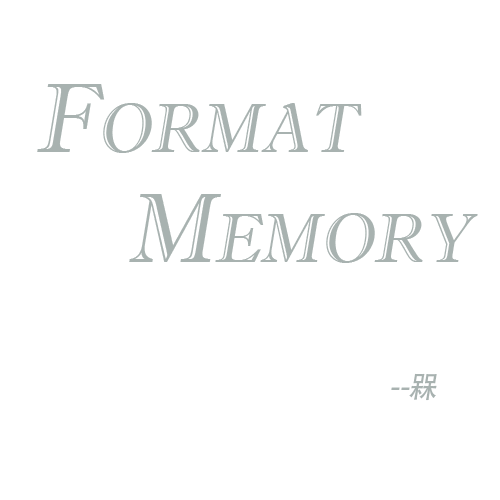
<style>
.page{position:relative;width:500px;height:500px;background:#ffffff}
.page>*{position:absolute;margin:0}
.t1{font:99.4px/11px "ImprintMT-Shadow";color:#a8b2b0;font-variant:small-caps;font-style:italic;scale:0.94 1}
.t2{font:30.4px/11px "AdobeHeitiStd-Regular";color:#a8b2b0;font-variant:small-caps;font-style:italic;scale:0.94 1}
</style>
<div class="page">
<p class="t1" style="left:37px;top:84px;width:441px;height:317px">Format <br><br><br><br><br><br><br><br><br><br>    Memory<br><br><br><br><br><br><br><br><br><br><br><br>                 <span class="t2">--槑</span></p>
</div>
